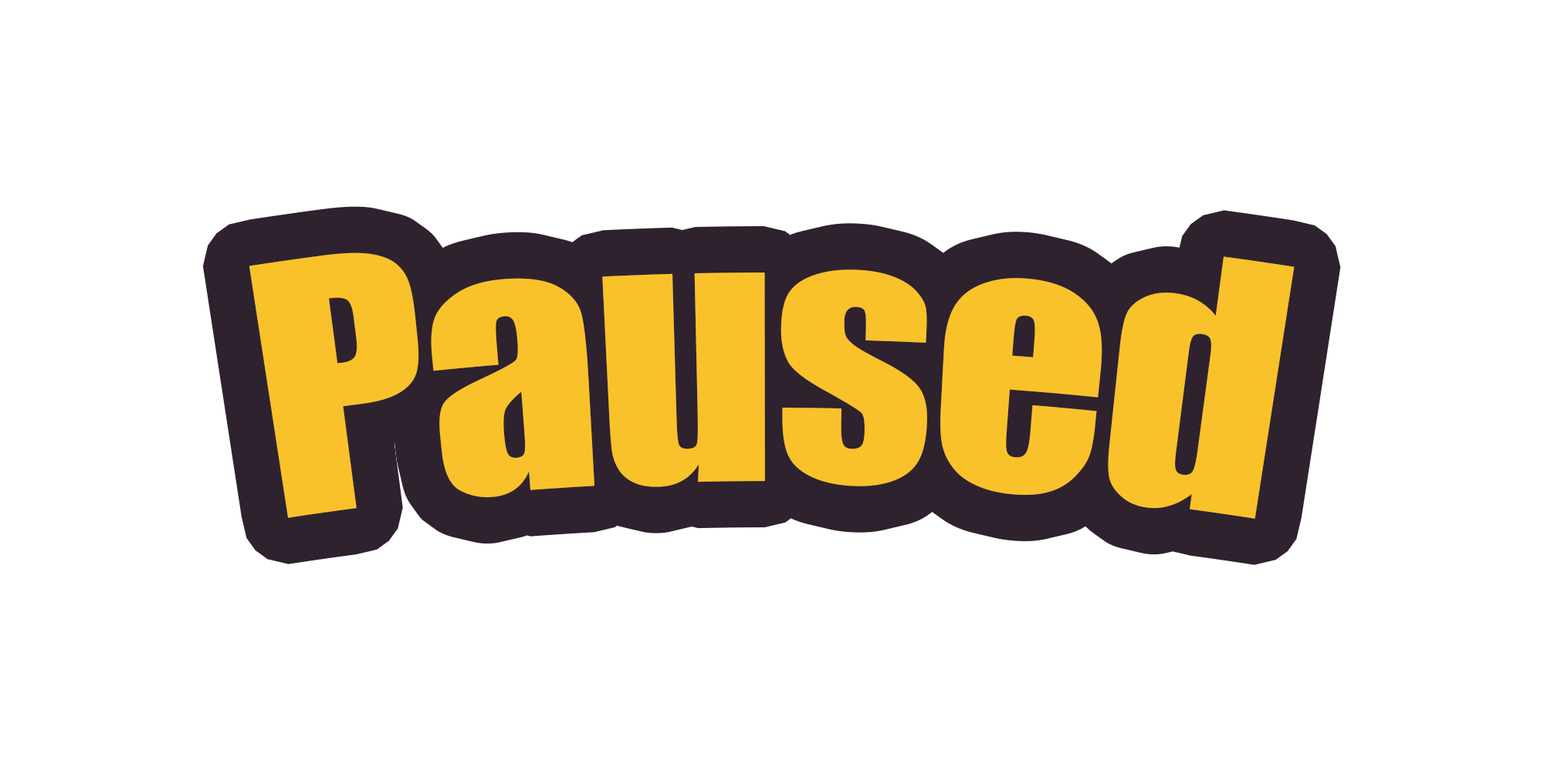
<style>
.page{position:relative;width:1544px;height:772px;background:#ffffff}
.page>*{position:absolute;margin:0}
.t1{font:321.7px "Impact";letter-spacing:-0.01em;color:#f9c22b}
</style>
<div class="page">
<p class="t1" style="left:249px;top:252px;width:1046px;height:267px">Paused</p>
</div>
